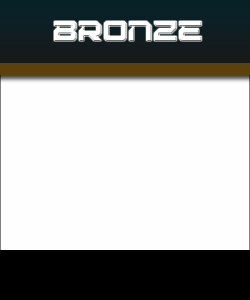
<style>
.page{position:relative;width:250px;height:300px;background:#fffefe}
.page>*{position:absolute;margin:0}
.t1{font:20px "Digital-Desolation";color:#ffffff}
</style>
<div class="page">
<p class="t1" style="left:54px;top:21px;width:148px;height:20px">BRONZE</p>
</div>
